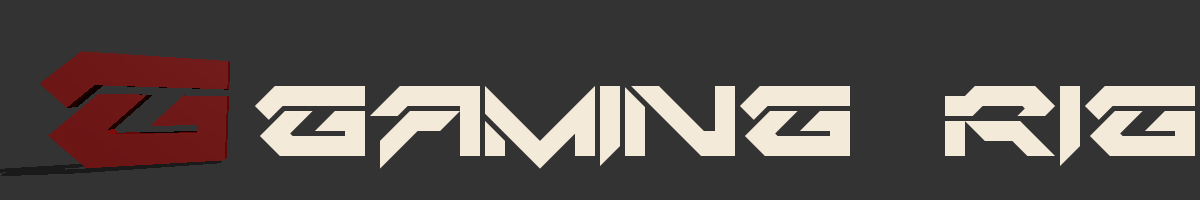
<style>
.page{position:relative;width:1200px;height:200px;background:#333333}
.page>*{position:absolute;margin:0}
.t1{font:80px "Critical-Mass-LDR";color:#f3ead9}
</style>
<div class="page">
<p class="t1" style="left:255px;top:86px;width:940px;height:83px">GAMING RIG</p>
</div>
